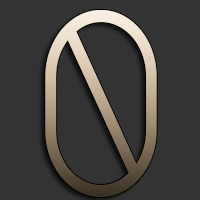
<style>
.page{position:relative;width:200px;height:200px;background:#333333}
.page>*{position:absolute;margin:0}
.t1{font:247.6px "GreyscaleBasic-Regular";scale:0.83 1}
</style>
<div class="page">
<p class="t1" style="left:45px;top:9px;width:112px;height:188px">0</p>
</div>
